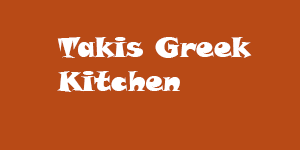
<style>
.page{position:relative;width:300px;height:150px;background:#b84a16}
.page>*{position:absolute;margin:0}
.t1{font:28px "SnapITC-Regular";color:#ffffff}
</style>
<div class="page">
<p class="t1" style="left:57px;top:37px;width:195px;height:55px">Takis Greek Kitchen</p>
</div>
